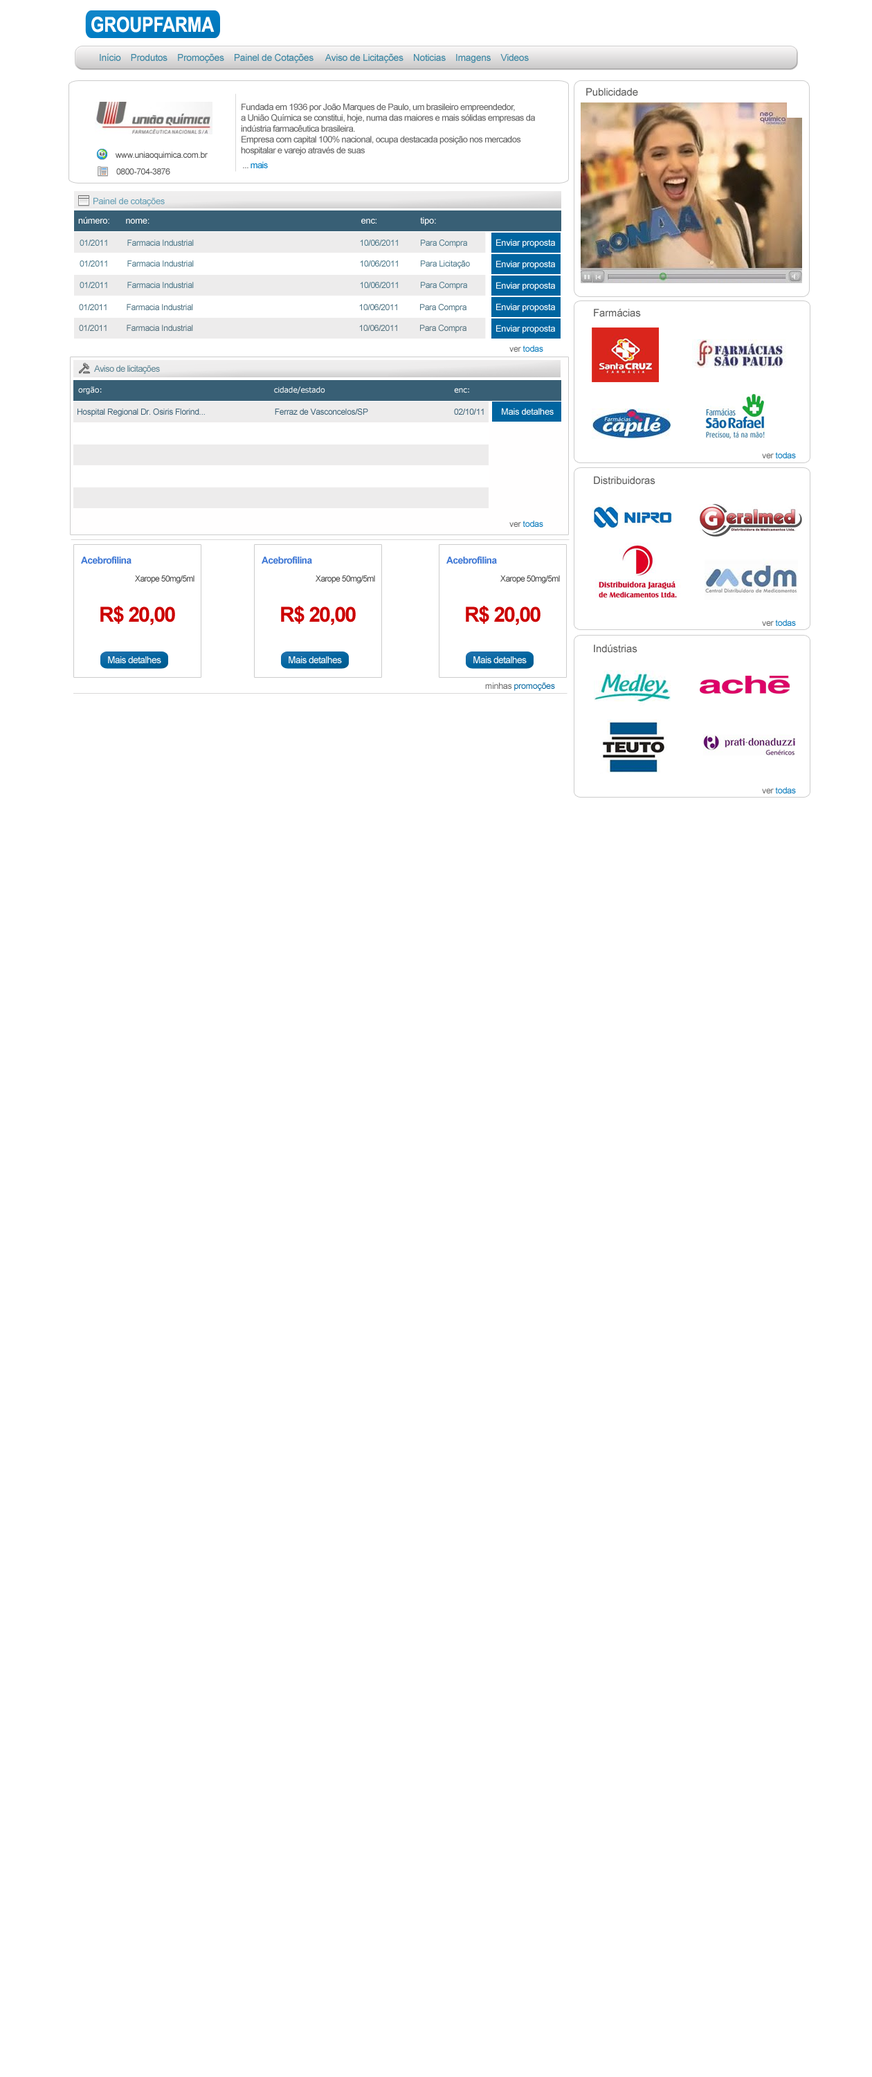
<style>
.page{position:relative;width:872px;height:2077px;background:#ffffff}
.page>*{position:absolute;margin:0}
.t1{font:20.8px "Arial-BoldMT";letter-spacing:-0.01em;color:#fefefe;scale:0.83 1}
.t2{font:9.7px "ArialMT";letter-spacing:-0.025em;color:#3a86a3}
.t3{font:10.4px "ArialMT";letter-spacing:-0.01em;color:#595958}
.t4{font:9px "ArialMT";letter-spacing:-0.05em;color:#656565}
.t5{font:8.3px "ArialMT";letter-spacing:-0.025em;color:#4c4c4c}
.t6{font:9px "ArialMT";letter-spacing:-0.05em;color:#007dc5}
.t7{font:9px "ArialMT";letter-spacing:-0.025em;color:#649db3}
.t8{font:9px "ArialMT";letter-spacing:-0.025em;color:#fefefe}
.t9{font:8.3px "ArialMT";letter-spacing:-0.025em;color:#497688}
.t10{font:8.3px "ArialMT";letter-spacing:-0.025em;color:#4b7181}
.t11{font:8.3px "ArialMT";letter-spacing:-0.025em;color:#51707d}
.t12{font:8.7px "ArialMT";letter-spacing:-0.025em;color:#0075b9}
.t13{font:8.7px "ArialMT";letter-spacing:-0.025em;color:#656565}
.t14{font:9px "ArialMT";letter-spacing:-0.05em;color:#5e8695}
.t15{font:7.6px "Verdana";letter-spacing:-0.025em;color:#ffffff}
.t16{font:8.3px "ArialMT";letter-spacing:-0.025em;color:#385f75}
.t17{font:9.7px "Arial-BoldMT";letter-spacing:-0.05em;color:#4179d5}
.t18{font:8.3px "ArialMT";letter-spacing:-0.05em;color:#414141}
.t19{font:20.8px "Arial-BoldMT";letter-spacing:-0.05em;color:#cc0000}
.t20{font:9.7px "ArialMT";letter-spacing:-0.05em;color:#fdfdfd}
.t21{font:8.7px "ArialMT";letter-spacing:-0.025em;color:#0065a0}
</style>
<div class="page">
<p class="t1" style="left:91px;top:17px;width:124px;height:16px">GROUPFARMA</p>
<p class="t2" style="left:100px;top:53px;width:429px;height:10px">Início    Produtos    Promoções    Painel de Cotações     Aviso de Licitações    Noticias    Imagens    Videos</p>
<p class="t3" style="left:586px;top:88px;width:52px;height:8px">Publicidade</p>
<p class="t4" style="left:241px;top:103px;width:294px;height:52px">Fundada em 1936 por João Marques de Paulo, um brasileiro empreendedor, <br>a União Química se constitui, hoje, numa das maiores e mais sólidas empresas da <br>indústria farmacêutica brasileira.<br>Empresa com capital 100% nacional, ocupa destacada posição nos mercados <br>hospitalar e varejo através de suas</p>
<p class="t5" style="left:116px;top:152px;width:92px;height:8px">www.uniaoquimica.com.br</p>
<p class="t6" style="left:243px;top:161px;width:25px;height:7px"><span class="t4">... </span>mais</p>
<p class="t5" style="left:116px;top:168px;width:54px;height:6px">0800-704-3876</p>
<p class="t7" style="left:93px;top:197px;width:72px;height:9px">Painel de cotações</p>
<p class="t8" style="left:78px;top:217px;width:358px;height:9px">número:       nome:                                                                                             enc:                   tipo:</p>
<p class="t9" style="left:80px;top:240px;width:387px;height:8px">01/2011         Farmacia Industrial                                                                               10/06/2011          Para Compra</p>
<p class="t8" style="left:496px;top:239px;width:59px;height:9px">Enviar proposta</p>
<p class="t9" style="left:80px;top:260px;width:390px;height:9px">01/2011         Farmacia Industrial                                                                               10/06/2011          Para Licitação</p>
<p class="t8" style="left:496px;top:260px;width:59px;height:9px">Enviar proposta</p>
<p class="t9" style="left:80px;top:282px;width:387px;height:8px">01/2011         Farmacia Industrial                                                                               10/06/2011          Para Compra</p>
<p class="t8" style="left:496px;top:282px;width:59px;height:9px">Enviar proposta</p>
<p class="t10" style="left:79px;top:304px;width:388px;height:8px">01/2011         Farmacia Industrial                                                                               10/06/2011          Para Compra</p>
<p class="t8" style="left:496px;top:303px;width:59px;height:9px">Enviar proposta</p>
<p class="t3" style="left:594px;top:309px;width:47px;height:8px">Farmácias</p>
<p class="t11" style="left:79px;top:325px;width:388px;height:8px">01/2011         Farmacia Industrial                                                                               10/06/2011          Para Compra</p>
<p class="t8" style="left:496px;top:325px;width:59px;height:9px">Enviar proposta</p>
<p class="t12" style="left:510px;top:345px;width:33px;height:7px"><span class="t13">ver</span> todas</p>
<p class="t14" style="left:94px;top:365px;width:66px;height:9px">Aviso de licitações</p>
<p class="t15" style="left:78px;top:386px;width:391px;height:9px">orgão:                                                                     cidade/estado                                                    enc:</p>
<p class="t16" style="left:78px;top:408px;width:406px;height:9px">Hospital Regional Dr. Osiris Florind...                                 Ferraz de Vasconcelos/SP                                         02/10/11</p>
<p class="t8" style="left:502px;top:408px;width:52px;height:7px">Mais detalhes</p>
<p class="t12" style="left:762px;top:452px;width:34px;height:6px"><span class="t13">ver</span> todas</p>
<p class="t3" style="left:594px;top:476px;width:62px;height:9px">Distribuidoras</p>
<p class="t12" style="left:510px;top:521px;width:33px;height:6px"><span class="t13">ver</span> todas</p>
<p class="t17" style="left:81px;top:556px;width:51px;height:8px">Acebrofilina</p>
<p class="t17" style="left:262px;top:556px;width:50px;height:8px">Acebrofilina</p>
<p class="t17" style="left:447px;top:556px;width:50px;height:8px">Acebrofilina</p>
<p class="t18" style="left:135px;top:575px;width:60px;height:9px">Xarope 50mg/5ml</p>
<p class="t18" style="left:316px;top:575px;width:59px;height:9px">Xarope 50mg/5ml</p>
<p class="t18" style="left:501px;top:575px;width:59px;height:9px">Xarope 50mg/5ml</p>
<p class="t19" style="left:100px;top:606px;width:75px;height:19px">R$ 20,00</p>
<p class="t19" style="left:281px;top:606px;width:75px;height:19px">R$ 20,00</p>
<p class="t19" style="left:466px;top:606px;width:75px;height:19px">R$ 20,00</p>
<p class="t12" style="left:762px;top:620px;width:34px;height:6px"><span class="t13">ver</span> todas</p>
<p class="t3" style="left:594px;top:645px;width:44px;height:8px">Indústrias</p>
<p class="t20" style="left:108px;top:656px;width:53px;height:7px">Mais detalhes</p>
<p class="t20" style="left:289px;top:656px;width:53px;height:7px">Mais detalhes</p>
<p class="t20" style="left:474px;top:656px;width:53px;height:7px">Mais detalhes</p>
<p class="t21" style="left:485px;top:683px;width:70px;height:8px"><span class="t13">minhas </span>promoções</p>
<p class="t12" style="left:762px;top:787px;width:34px;height:6px"><span class="t13">ver</span> todas</p>
</div>
